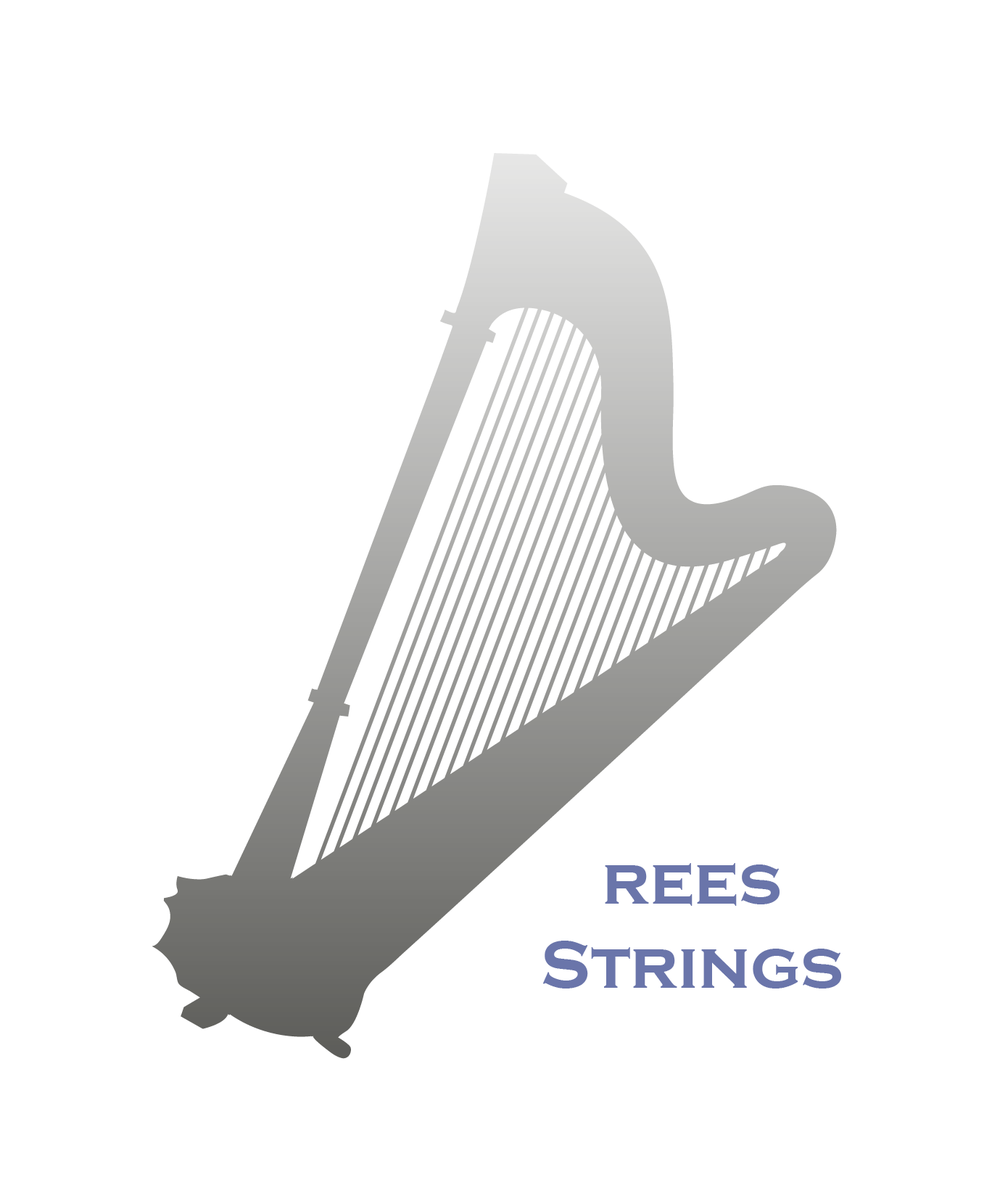
<style>
.page{position:relative;width:992px;height:1201px;background:#ffffff}
.page>*{position:absolute;margin:0}
.t1{font:69.6px "CopperplateGothic-Bold";color:#6a75aa}
</style>
<div class="page">
<p class="t1" style="left:543px;top:863px;width:299px;height:126px;text-align:center">rees<br>Strings</p>
</div>
